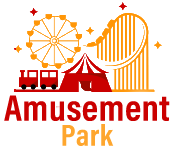
<style>
.page{position:relative;width:176px;height:151px;background:#ffffff}
.page>*{position:absolute;margin:0}
.t1{font:37.2px/25px "AcuminConcept-CondensedBold";letter-spacing:0.01em;color:#ca0000}
.t2{font:30.6px/25px "AcuminConcept-CondensedBold";letter-spacing:0.01em;color:#fea62e}
</style>
<div class="page">
<p class="t1" style="left:4px;top:95px;width:166px;height:51px;text-align:center">Amusement<br><span class="t2">Park</span></p>
</div>
